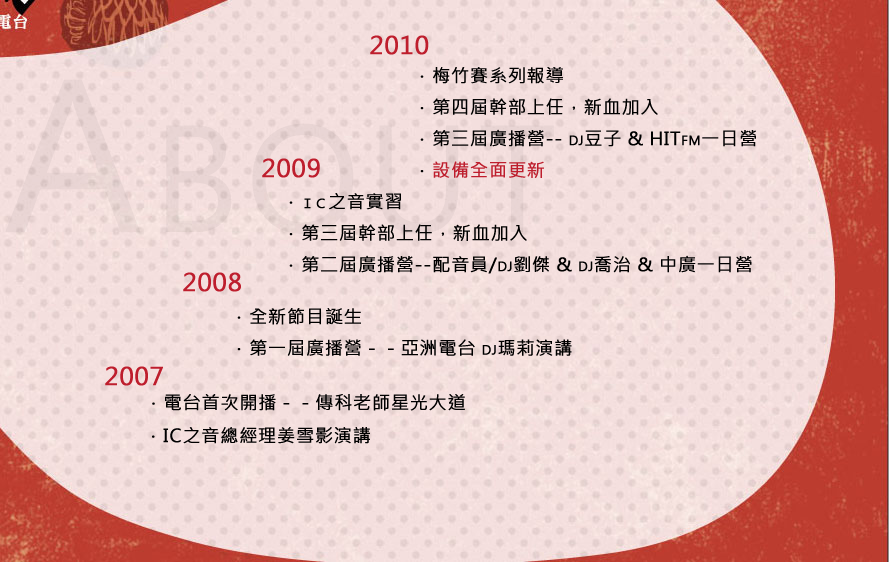
<style>
.page{position:relative;width:889px;height:562px}
.page>*{position:absolute;margin:0}
.t1{font:24px "MicrosoftJhengHeiRegular";letter-spacing:0.025em;color:#be1e2d;font-variant:small-caps;font-weight:bold}
.t2{font:18px "MicrosoftJhengHeiRegular";letter-spacing:0.025em;color:#000000;font-variant:small-caps;font-weight:bold}
.t3{font:18px "MicrosoftJhengHeiRegular";letter-spacing:0.025em;color:#be1e2d;font-variant:small-caps;font-weight:bold}
</style>
<div class="page">
<p class="t1" style="left:370px;top:35px;width:59px;height:20px">2010</p>
<p class="t2" style="left:420px;top:67px;width:336px;height:111px">．梅竹賽系列報導 <br>．第四屆幹部上任，新血加入 <br>．第三屆廣播營-- dj豆子 &amp; HITfm一日營<br>．<span class="t3">設備全面更新</span></p>
<p class="t1" style="left:262px;top:158px;width:58px;height:20px">2009</p>
<p class="t2" style="left:289px;top:193px;width:463px;height:81px">．ｉｃ之音實習<br>．第三屆幹部上任，新血加入<br>．第二屆廣播營--配音員/dj劉傑 &amp; dj喬治 &amp; 中廣一日營</p>
<p class="t1" style="left:183px;top:272px;width:58px;height:20px">2008</p>
<p class="t2" style="left:237px;top:308px;width:335px;height:48px">．全新節目誕生<br>．第一屆廣播營－－亞洲電台 dj瑪莉演講</p>
<p class="t1" style="left:105px;top:366px;width:58px;height:20px">2007</p>
<p class="t2" style="left:152px;top:394px;width:313px;height:17px">．電台首次開播－－傳科老師星光大道</p>
<p class="t2" style="left:152px;top:427px;width:218px;height:17px">．IC之音總經理姜雪影演講</p>
</div>
